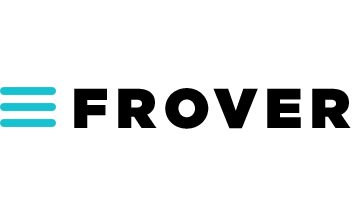
<style>
.page{position:relative;width:360px;height:214px;background:#ffffff}
.page>*{position:absolute;margin:0}
.t1{font:56px "Gotham-Ultra";letter-spacing:0.14em;color:#000000;text-transform:uppercase}
</style>
<div class="page">
<p class="t1" style="left:74px;top:88px;width:277px;height:41px">frover</p>
</div>
